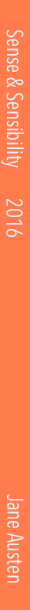
<style>
.page{position:relative;width:30px;height:610px;background:#ff7b4b}
.page>*{position:absolute;margin:0}
.t1{font:22.4px "AvenirNextCondensed-Regular";color:#eff3f6;scale:0.94 1}
</style>
<div class="page">
<p class="t1" style="left:1px;top:29px;width:23px;height:139px;rotate:90deg">Sense &amp; Sensibility</p>
<p class="t1" style="left:6px;top:199px;width:17px;height:38px;rotate:90deg">2016</p>
<p class="t1" style="left:7px;top:494px;width:17px;height:89px;rotate:90deg">Jane Austen</p>
</div>
